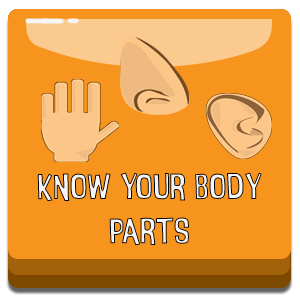
<style>
.page{position:relative;width:300px;height:300px;background:#f7941d}
.page>*{position:absolute;margin:0}
.t1{font:37px "InsideOut"}
</style>
<div class="page">
<p class="t1" style="left:37px;top:172px;width:225px;height:74px;text-align:center">know your body parts</p>
</div>
